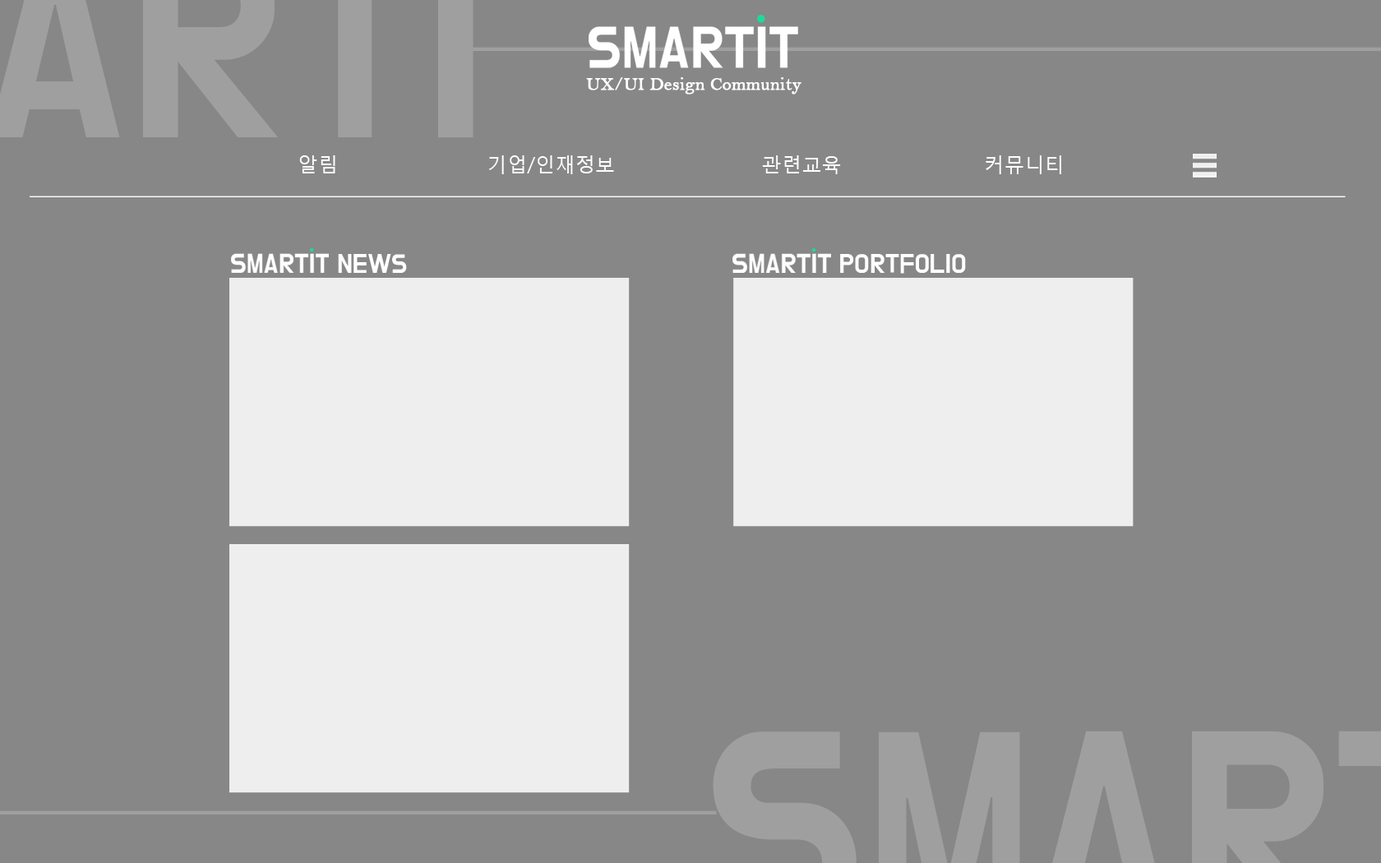
<style>
.page{position:relative;width:1381px;height:863px;background:#878787}
.page>*{position:absolute;margin:0}
.t1{font:17.9px "BellMT";color:#ffffff;font-weight:bold}
.t2{font:20.1px "MalgunGothicRegular";color:#ffffff}
</style>
<div class="page">
<p class="t1" style="left:586px;top:77px;width:216px;height:18px">UX/UI Design Community</p>
<p class="t2" style="left:299px;top:155px;width:36px;height:18px">알림</p>
<p class="t2" style="left:488px;top:155px;width:126px;height:19px">기업/인재정보</p>
<p class="t2" style="left:762px;top:155px;width:79px;height:19px">관련교육</p>
<p class="t2" style="left:986px;top:155px;width:75px;height:19px">커뮤니티</p>
</div>
